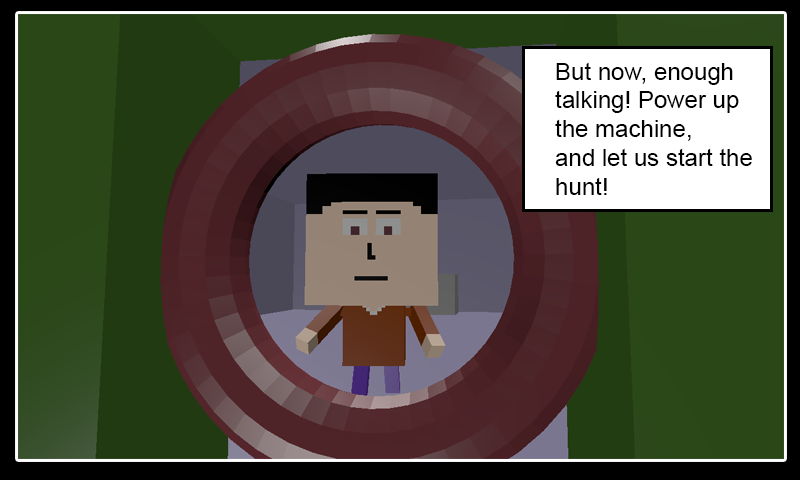
<style>
.page{position:relative;width:800px;height:480px}
.page>*{position:absolute;margin:0}
.t1{font:24px "ArialMT";color:#000000}
</style>
<div class="page">
<p class="t1" style="left:555px;top:62px;width:197px;height:133px">But now, enough<br>talking! Power up<br>the machine,<br>and let us start the<br>hunt!</p>
</div>
